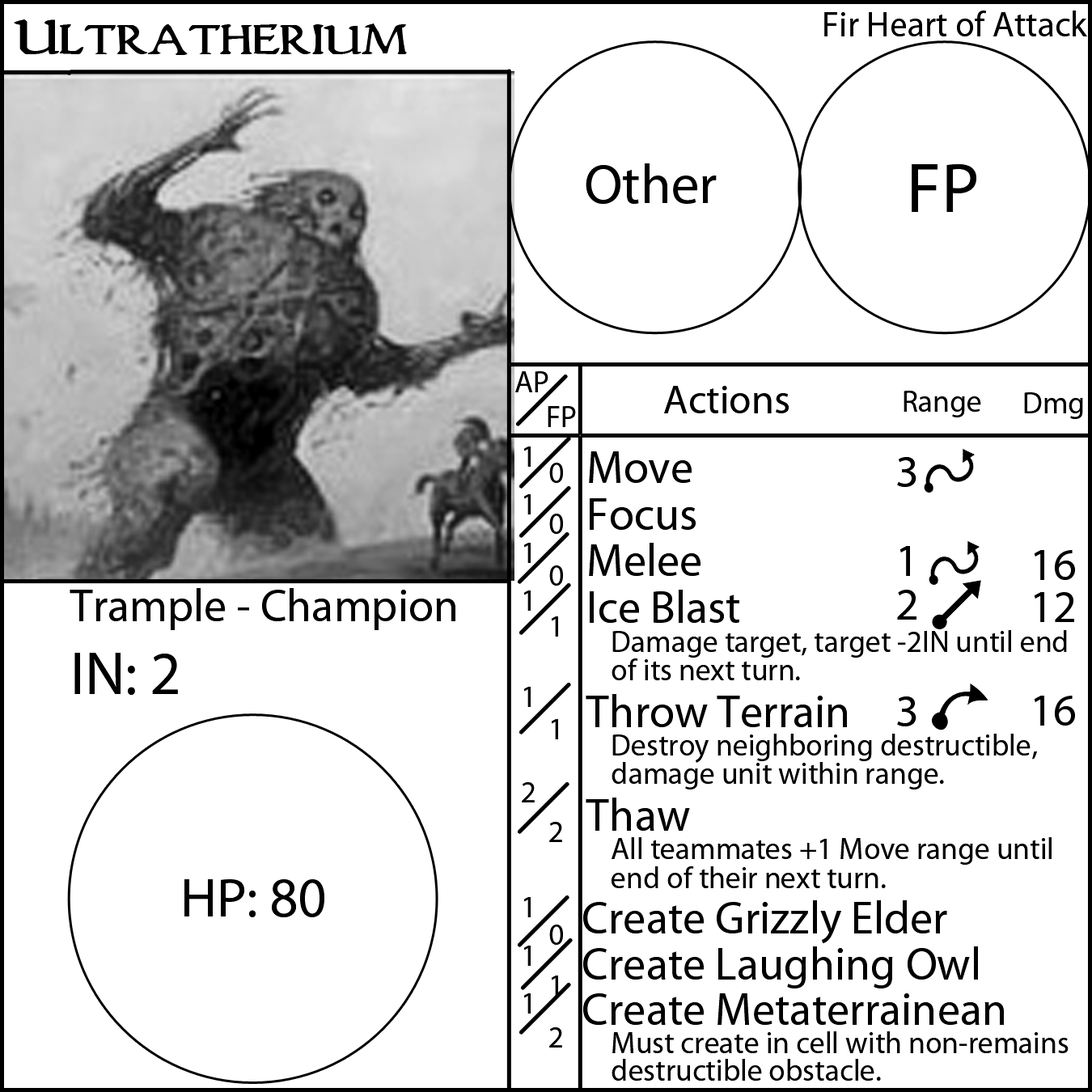
<style>
.page{position:relative;width:1092px;height:1092px;background:#ffffff}
.page>*{position:absolute;margin:0}
.t1{font:35.4px "MyriadPro-Regular";color:#000000}
.t2{font:55.6px "WoodgodExpanded";color:#000000}
.t3{font:55.6px "MyriadPro-Regular";color:#000000}
.t4{font:70.8px "MyriadPro-Regular";color:#000000}
.t5{font:30.3px "MyriadPro-Regular";color:#000000}
.t6{font:40.4px "MyriadPro-Regular";color:#000000}
.t7{font:45.5px "MyriadPro-Regular";color:#000000}
.t8{font:60.7px "MyriadPro-Regular";color:#000000}
</style>
<div class="page">
<p class="t1" style="left:824px;top:11px;width:263px;height:25px">Fir Heart of Attack</p>
<p class="t2" style="left:14px;top:19px;width:393px;height:36px">Ultratherium</p>
<p class="t3" style="left:586px;top:163px;width:131px;height:41px">Other</p>
<p class="t4" style="left:912px;top:164px;width:64px;height:48px">FP</p>
<p class="t5" style="left:515px;top:371px;width:33px;height:21px">AP</p>
<p class="t6" style="left:664px;top:386px;width:125px;height:27px">Actions</p>
<p class="t5" style="left:904px;top:391px;width:77px;height:26px">Range</p>
<p class="t5" style="left:1024px;top:392px;width:59px;height:27px">Dmg</p>
<p class="t5" style="left:548px;top:406px;width:28px;height:21px">FP</p>
<p class="t5" style="left:522px;top:447px;width:13px;height:567px">1<br>1<br>1<br>1<br><br>1<br><br>2<br>1 <br>1<br>1</p>
<p class="t5" style="left:583px;top:451px;width:486px;height:630px"><span class="t7">Move<br>Focus<br>Melee<br>Ice Blast<br></span> Damage target, target -2IN until end <br> of its next turn.<br><span class="t7">Throw Terrain<br></span> Destroy neighboring destructible,  <br> damage unit within range.<br><span class="t7">Thaw<br></span> All teammates +1 Move range until  <br> end of their next turn.<br><span class="t7">Create Grizzly Elder<br>Create Laughing Owl<br>Create Metaterrainean<br></span> Must create in cell with non-remains<br>  destructible obstacle.</p>
<p class="t7" style="left:897px;top:457px;width:19px;height:269px;text-align:center">3<br><br>1<br>2<br> <br>3</p>
<p class="t5" style="left:549px;top:463px;width:14px;height:584px">0<br>0<br>0<br>1<br><br>1<br><br>2<br><br>0<br>1<br>2</p>
<p class="t7" style="left:1034px;top:550px;width:41px;height:176px;text-align:center">16<br>12<br> <br>16</p>
<p class="t7" style="left:70px;top:588px;width:385px;height:107px">Trample - Champion<br><span class="t8">IN: 2</span></p>
<p class="t3" style="left:184px;top:879px;width:140px;height:38px">HP: 80</p>
</div>
